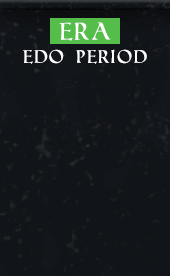
<style>
.page{position:relative;width:170px;height:276px;background:#111418}
.page>*{position:absolute;margin:0}
.t1{font:24px "RomanSD";color:#ffffff}
.t2{font:18px "RomanSD";color:#ffffff}
</style>
<div class="page">
<p class="t1" style="left:59px;top:22px;width:52px;height:19px">ERA</p>
<p class="t2" style="left:23px;top:49px;width:124px;height:15px">EDO PERIOD</p>
</div>
